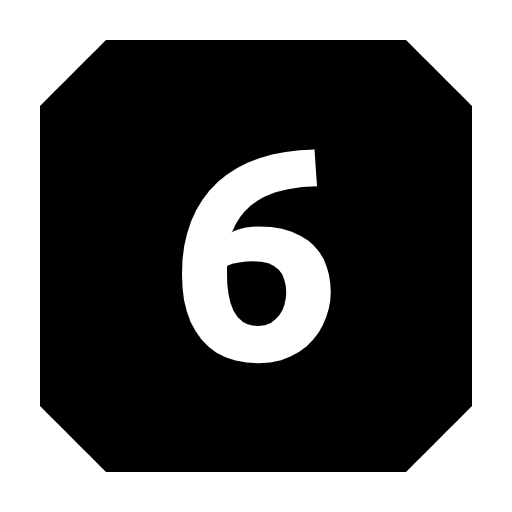
<style>
.page{position:relative;width:512px;height:512px;background:#000000}
.page>*{position:absolute;margin:0}
.t1{font:300px "Ubuntu-Bold";color:#ffffff}
</style>
<div class="page">
<p class="t1" style="left:181px;top:149px;width:150px;height:215px">6</p>
</div>
